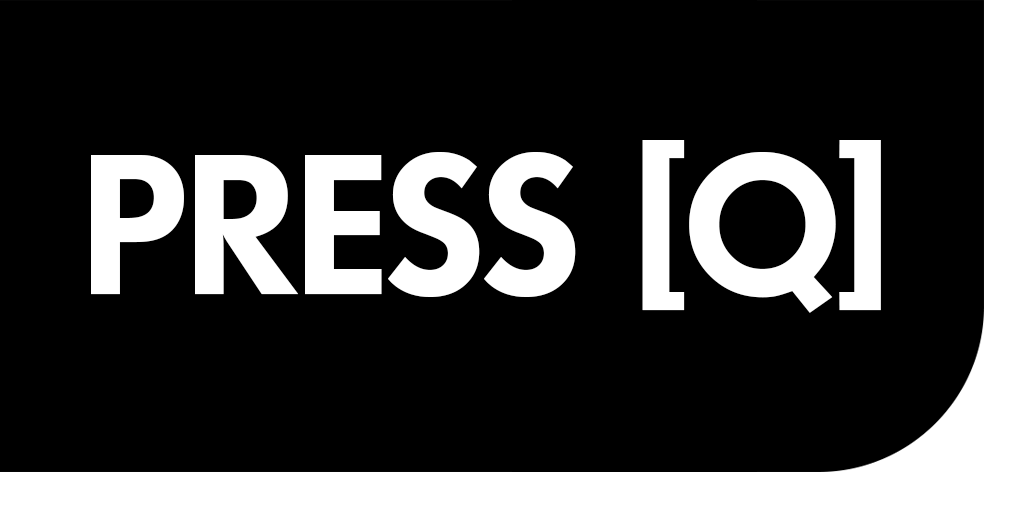
<style>
.page{position:relative;width:1024px;height:512px;background:#000000}
.page>*{position:absolute;margin:0}
.t1{font:192.4px "Limerick-Serial-Bold";color:#ffffff}
</style>
<div class="page">
<p class="t1" style="left:91px;top:140px;width:790px;height:173px">PRESS [Q]</p>
</div>
